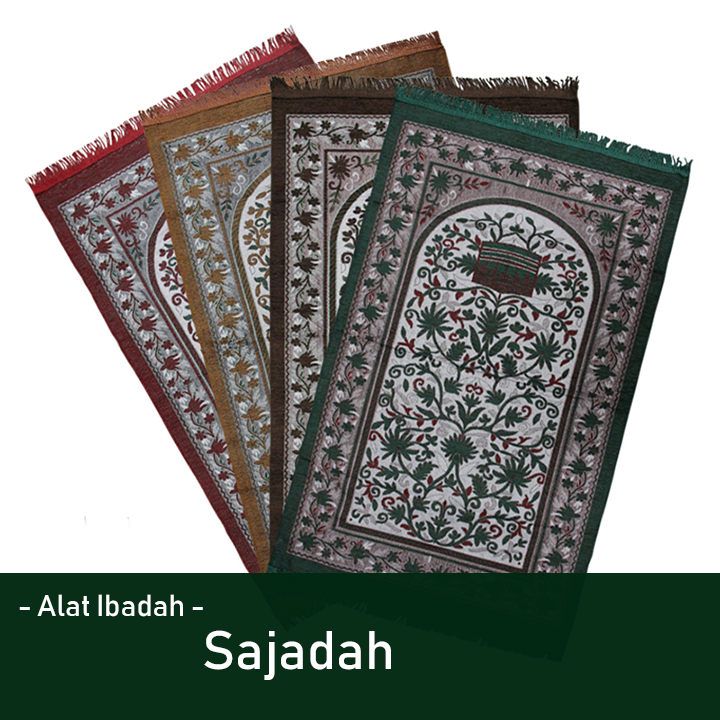
<style>
.page{position:relative;width:720px;height:720px;background:#ffffff}
.page>*{position:absolute;margin:0}
.t1{font:30px "Bahnschrift";color:#ffffff}
.t2{font:53.6px "Bahnschrift";color:#ffffff}
</style>
<div class="page">
<p class="t1" style="left:19px;top:594px;width:184px;height:23px">- Alat Ibadah -</p>
<p class="t2" style="left:204px;top:630px;width:187px;height:50px">Sajadah</p>
</div>
